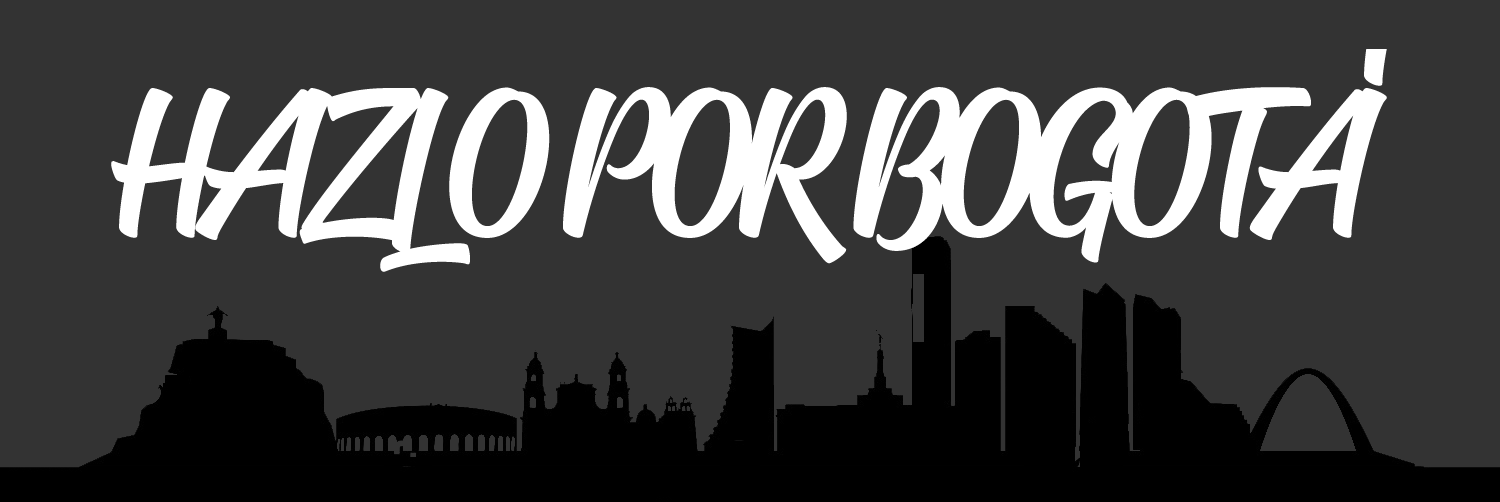
<style>
.page{position:relative;width:1500px;height:502px;background:#333333}
.page>*{position:absolute;margin:0}
.t1{font:231.7px "SignatraDEMO";letter-spacing:-0.05em;color:#ffffff;text-transform:uppercase}
</style>
<div class="page">
<p class="t1" style="left:111px;top:87px;width:1276px;height:185px">hazlo por bogotaá</p>
</div>
